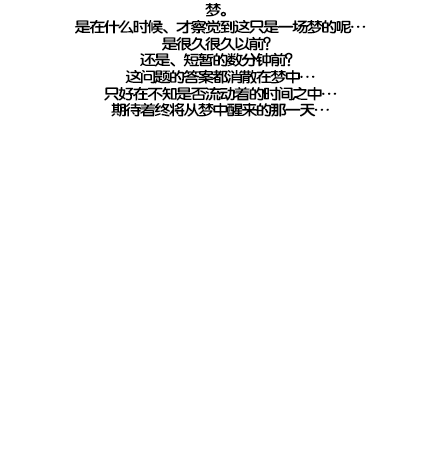
<style>
.page{position:relative;width:440px;height:476px;background:#ffffff}
.page>*{position:absolute;margin:0}
.t1{font:14.7px/16.7px "FZY4K--GBK1-0";letter-spacing:-0.13em;color:#000000;scale:1.14 1}
</style>
<div class="page">
<p class="t1" style="left:74px;top:3px;width:292px;height:114px;text-align:center">梦。<br>是在什么时候、才察觉到这只是一场梦的呢…<br>是很久很久以前？<br>还是、短暂的数分钟前？<br>这问题的答案都消散在梦中…<br>只好在不知是否流动着的时间之中…<br>期待着终将从梦中醒来的那一天…</p>
</div>
